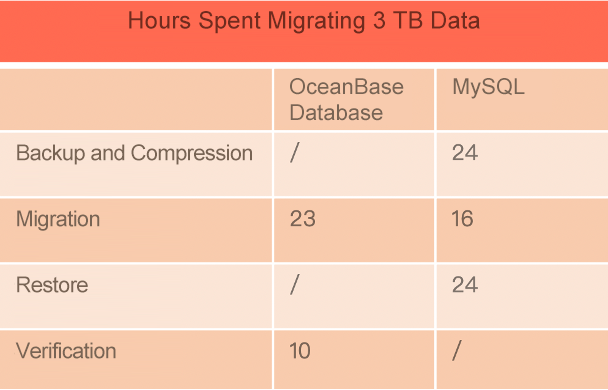
<style>
.page{position:relative;width:608px;height:390px}
.page>*{position:absolute;margin:0}
.t1{font:24px "ArialMT";color:#702b1e}
.t2{font:22px/26px "ArialMT";color:#786454}
.t3{font:22px "ArialMT";color:#786454}
.t4{font:22px/66px "ArialMT";letter-spacing:-0.03em;color:#786454}
</style>
<div class="page">
<p class="t1" style="left:129px;top:11px;width:351px;height:23px">Hours Spent Migrating 3 TB Data</p>
<p class="t2" style="left:290px;top:78px;width:114px;height:43px">OceanBase <br>Database</p>
<p class="t3" style="left:453px;top:78px;width:72px;height:21px">MySQL</p>
<p class="t4" style="left:15px;top:144px;width:237px;height:215px">Backup and Compression<br>Migration<br>Restore<br>Verification</p>
</div>
